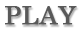
<style>
.page{position:relative;width:80px;height:30px;background:#ffffff}
.page>*{position:absolute;margin:0}
.t1{font:25px "Century";letter-spacing:0.01em;color:#595959;font-weight:bold}
</style>
<div class="page">
<p class="t1" style="left:5px;top:6px;width:72px;height:19px">PLAY</p>
</div>
